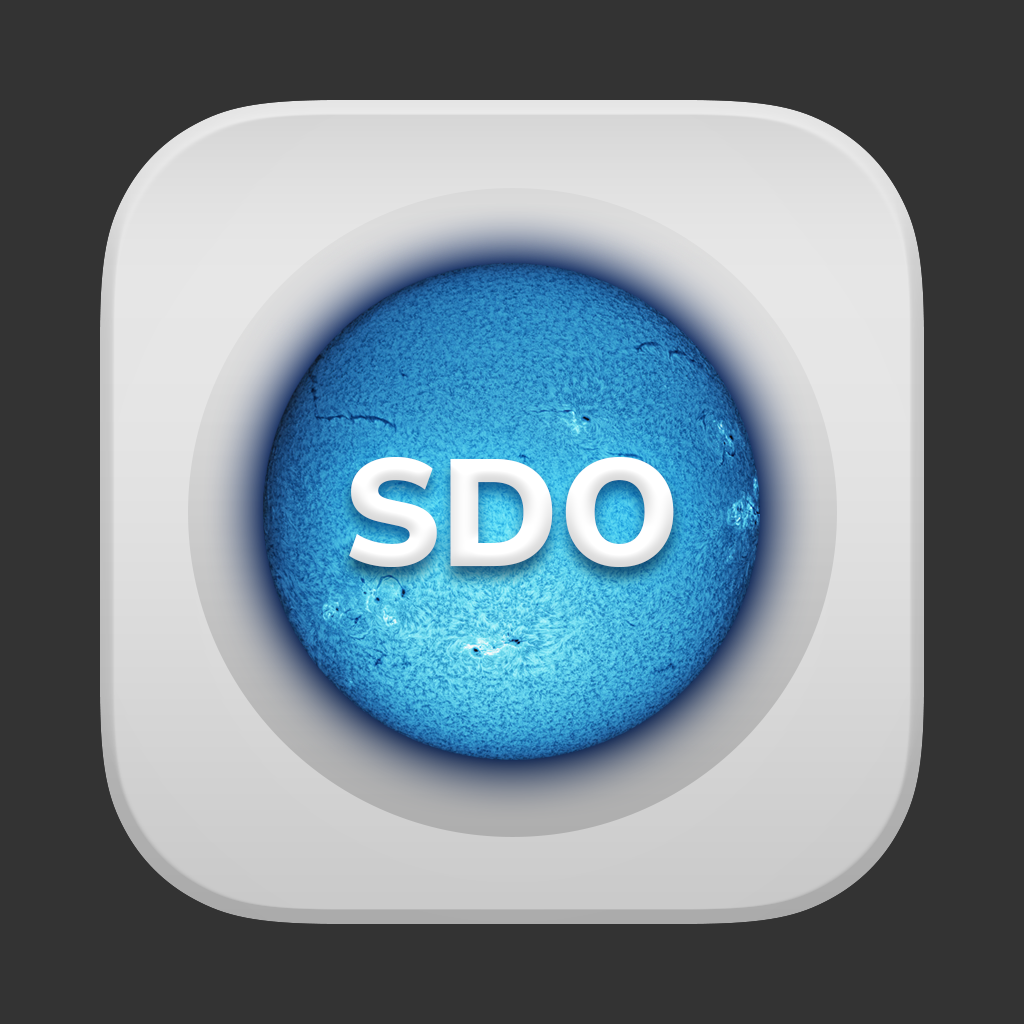
<style>
.page{position:relative;width:1024px;height:1024px;background:#333333}
.page>*{position:absolute;margin:0}
.t1{font:150px "NunitoSans-Black";color:#ffffff}
</style>
<div class="page">
<p class="t1" style="left:349px;top:457px;width:325px;height:110px">SDO</p>
</div>
